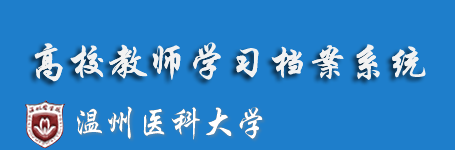
<style>
.page{position:relative;width:455px;height:150px;background:#1e7ecb}
.page>*{position:absolute;margin:0}
.t1{font:40px "STXingkai";color:#f2f2f2}
</style>
<div class="page">
<p class="t1" style="left:34px;top:42px;width:392px;height:40px">高校教师学习档案系统</p>
</div>
